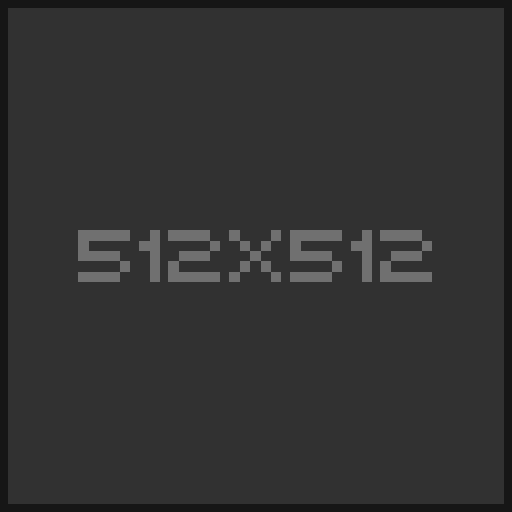
<style>
.page{position:relative;width:512px;height:512px;background:#313131}
.page>*{position:absolute;margin:0}
.t1{font:72px "RetroComputer";color:#707070}
</style>
<div class="page">
<p class="t1" style="left:78px;top:230px;width:354px;height:52px">512x512</p>
</div>
